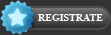
<style>
.page{position:relative;width:111px;height:35px;background:#333333}
.page>*{position:absolute;margin:0}
.t1{font:10px "TimesNewRomanPS-BoldMT";color:#fefbfb}
</style>
<div class="page">
<p class="t1" style="left:38px;top:14px;width:65px;height:7px">REGISTRATE</p>
</div>
